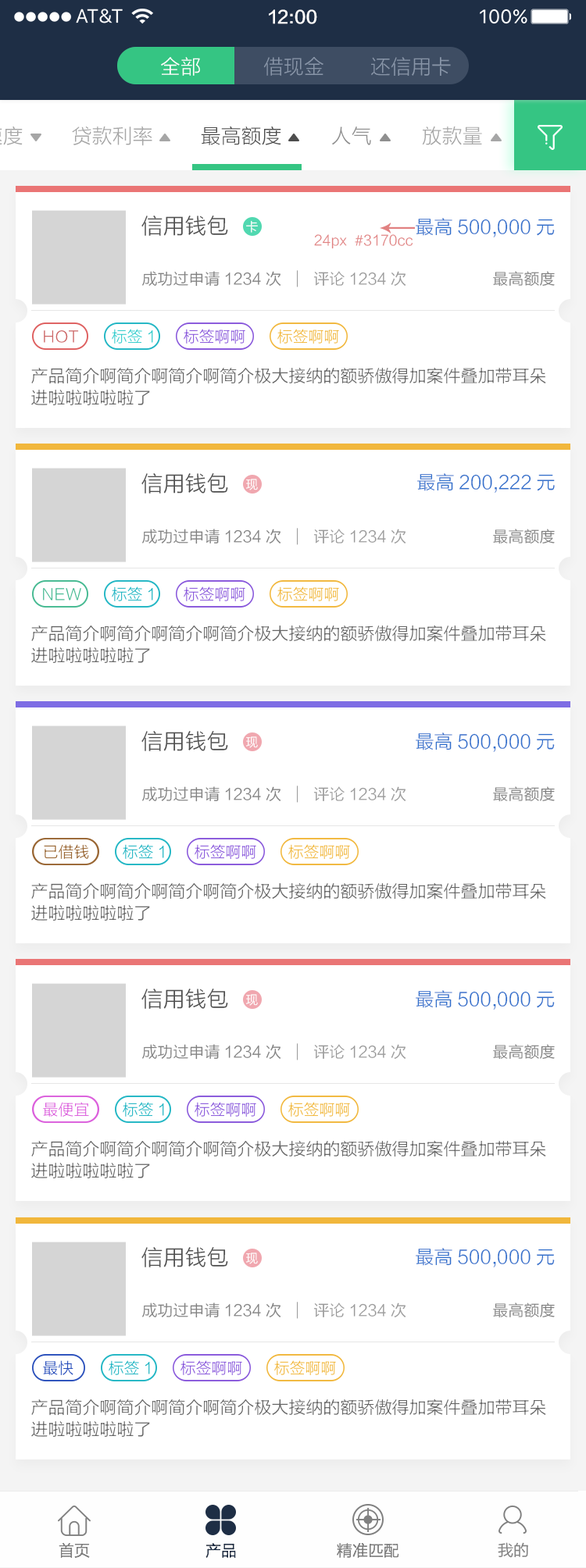
<style>
.page{position:relative;width:586px;height:1568px;background:#ffffff}
.page>*{position:absolute;margin:0}
.t1{font:17.2px "FZLTZHK--GBK1-0";color:#ffffff}
.t2{font:20.3px "FZLTXHK";color:#ffffff}
.t3{font:20.3px "FZLTXHK";color:#8895a8}
.t4{font:20.3px "FZLTXHK";color:#a6a6a6}
.t5{font:20.3px "FZLTXHK";color:#4d4d4d}
.t6{font:20.3px "FZLTXHK";color:#8f8f8f}
.t7{font:21.9px "FZLTXHK";color:#4d4d4d}
.t8{font:12.5px "FZLTXHK";color:#ffffff}
.t9{font:18.7px "FZLTXHK";color:#3170cc}
.t10{font:14.1px "FZLTXHK";color:#e18181}
.t11{font:15.6px "FZLTXHK";color:#808080}
.t12{font:15.6px "FZLTXHK";color:#999999}
.t13{font:15.6px "FZLTXHK";color:#33cccc}
.t14{font:15.6px "FZLTXHK";color:#8857db}
.t15{font:15.6px "FZLTXHK";color:#f1b73c}
.t16{font:15.6px "FZLTXHK";color:#cc6666}
.t17{font:17.2px/21.9px "FZLTXHK";color:#666666}
.t18{font:15.6px "FZLTXHK";color:#45b991}
.t19{font:15.6px "FZLTXHK";color:#21b5c3}
.t20{font:15.6px "FZLTXHK";color:#996633}
.t21{font:15.6px "FZLTXHK";color:#db5edc}
.t22{font:15.6px "FZLTXHK";color:#294fbb}
.t23{font:15.6px "FZLTXHK";color:#1e2e45}
.t24{font:15.6px "FZLTHK--GBK1-0";color:#808080}
</style>
<div class="page">
<p class="t1" style="left:269px;top:9px;width:48px;height:15px">12:00</p>
<p class="t2" style="left:161px;top:57px;width:39px;height:19px">全部</p>
<p class="t3" style="left:263px;top:57px;width:60px;height:19px">借现金</p>
<p class="t3" style="left:371px;top:57px;width:80px;height:19px">还信用卡</p>
<p class="t4" style="left:72px;top:126px;width:80px;height:20px">贷款利率</p>
<p class="t5" style="left:201px;top:126px;width:80px;height:19px">最高额度</p>
<p class="t4" style="left:422px;top:126px;width:60px;height:19px">放款量</p>
<p class="t6" style="left:332px;top:127px;width:39px;height:18px">人气</p>
<p class="t7" style="left:141px;top:216px;width:87px;height:20px">信用钱包</p>
<p class="t8" style="left:246px;top:220px;width:12px;height:13px">卡</p>
<p class="t9" style="left:415px;top:218px;width:139px;height:19px">最高500,000元</p>
<p class="t10" style="left:314px;top:234px;width:99px;height:15px">24px  #3170cc</p>
<p class="t11" style="left:142px;top:271px;width:139px;height:16px">成功过申请1234次</p>
<p class="t12" style="left:313px;top:271px;width:93px;height:15px">评论1234次</p>
<p class="t11" style="left:493px;top:271px;width:61px;height:16px">最高额度</p>
<p class="t13" style="left:112px;top:329px;width:41px;height:15px">标签1</p>
<p class="t14" style="left:184px;top:329px;width:61px;height:15px">标签啊啊</p>
<p class="t15" style="left:277px;top:329px;width:62px;height:15px">标签啊啊</p>
<p class="t16" style="left:44px;top:330px;width:35px;height:13px">HOT</p>
<p class="t17" style="left:31px;top:367px;width:515px;height:38px">产品简介啊简介啊简介啊简介极大接纳的额骄傲得加案件叠加带耳朵<br>进啦啦啦啦啦了</p>
<p class="t7" style="left:141px;top:473px;width:87px;height:21px">信用钱包</p>
<p class="t9" style="left:417px;top:473px;width:137px;height:20px">最高200,222元</p>
<p class="t8" style="left:246px;top:479px;width:12px;height:11px">现</p>
<p class="t11" style="left:142px;top:529px;width:139px;height:15px">成功过申请1234次</p>
<p class="t12" style="left:313px;top:529px;width:93px;height:14px">评论1234次</p>
<p class="t11" style="left:493px;top:529px;width:61px;height:15px">最高额度</p>
<p class="t18" style="left:43px;top:588px;width:38px;height:12px">NEW</p>
<p class="t19" style="left:112px;top:586px;width:41px;height:15px">标签1</p>
<p class="t14" style="left:184px;top:586px;width:61px;height:15px">标签啊啊</p>
<p class="t15" style="left:277px;top:586px;width:62px;height:15px">标签啊啊</p>
<p class="t17" style="left:31px;top:625px;width:515px;height:38px">产品简介啊简介啊简介啊简介极大接纳的额骄傲得加案件叠加带耳朵<br>进啦啦啦啦啦了</p>
<p class="t7" style="left:141px;top:731px;width:87px;height:20px">信用钱包</p>
<p class="t8" style="left:246px;top:736px;width:12px;height:12px">现</p>
<p class="t9" style="left:415px;top:732px;width:139px;height:20px">最高500,000元</p>
<p class="t11" style="left:142px;top:786px;width:139px;height:16px">成功过申请1234次</p>
<p class="t12" style="left:313px;top:786px;width:93px;height:15px">评论1234次</p>
<p class="t11" style="left:493px;top:786px;width:61px;height:16px">最高额度</p>
<p class="t20" style="left:44px;top:844px;width:45px;height:15px">已借钱</p>
<p class="t19" style="left:123px;top:844px;width:41px;height:15px">标签1</p>
<p class="t14" style="left:194px;top:844px;width:62px;height:15px">标签啊啊</p>
<p class="t15" style="left:288px;top:844px;width:62px;height:15px">标签啊啊</p>
<p class="t17" style="left:31px;top:882px;width:515px;height:39px">产品简介啊简介啊简介啊简介极大接纳的额骄傲得加案件叠加带耳朵<br>进啦啦啦啦啦了</p>
<p class="t7" style="left:141px;top:989px;width:87px;height:20px">信用钱包</p>
<p class="t8" style="left:246px;top:994px;width:12px;height:12px">现</p>
<p class="t9" style="left:415px;top:990px;width:139px;height:20px">最高500,000元</p>
<p class="t11" style="left:142px;top:1044px;width:139px;height:16px">成功过申请1234次</p>
<p class="t12" style="left:313px;top:1044px;width:93px;height:15px">评论1234次</p>
<p class="t11" style="left:493px;top:1044px;width:61px;height:16px">最高额度</p>
<p class="t21" style="left:43px;top:1102px;width:46px;height:15px">最便宜</p>
<p class="t19" style="left:123px;top:1102px;width:41px;height:15px">标签1</p>
<p class="t14" style="left:194px;top:1102px;width:62px;height:15px">标签啊啊</p>
<p class="t15" style="left:288px;top:1102px;width:62px;height:15px">标签啊啊</p>
<p class="t17" style="left:31px;top:1140px;width:515px;height:38px">产品简介啊简介啊简介啊简介极大接纳的额骄傲得加案件叠加带耳朵<br>进啦啦啦啦啦了</p>
<p class="t7" style="left:141px;top:1247px;width:87px;height:20px">信用钱包</p>
<p class="t8" style="left:246px;top:1253px;width:12px;height:11px">现</p>
<p class="t9" style="left:415px;top:1248px;width:139px;height:19px">最高500,000元</p>
<p class="t11" style="left:142px;top:1303px;width:139px;height:15px">成功过申请1234次</p>
<p class="t12" style="left:313px;top:1303px;width:93px;height:14px">评论1234次</p>
<p class="t11" style="left:493px;top:1303px;width:61px;height:15px">最高额度</p>
<p class="t22" style="left:43px;top:1360px;width:30px;height:15px">最快</p>
<p class="t19" style="left:109px;top:1360px;width:41px;height:15px">标签1</p>
<p class="t14" style="left:180px;top:1360px;width:62px;height:15px">标签啊啊</p>
<p class="t15" style="left:274px;top:1360px;width:62px;height:15px">标签啊啊</p>
<p class="t17" style="left:31px;top:1399px;width:515px;height:38px">产品简介啊简介啊简介啊简介极大接纳的额骄傲得加案件叠加带耳朵<br>进啦啦啦啦啦了</p>
<p class="t11" style="left:59px;top:1542px;width:31px;height:16px">首页</p>
<p class="t23" style="left:205px;top:1543px;width:31px;height:15px">产品</p>
<p class="t11" style="left:337px;top:1543px;width:62px;height:15px">精准匹配</p>
<p class="t24" style="left:497px;top:1542px;width:31px;height:16px">我的</p>
</div>
